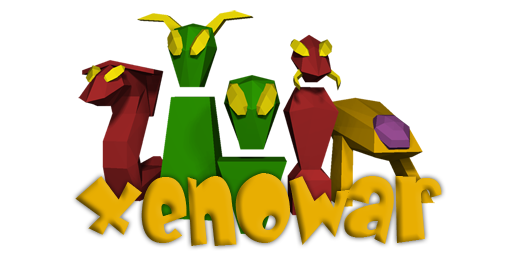
<style>
.page{position:relative;width:512px;height:256px;background:#ffffff}
.page>*{position:absolute;margin:0}
.t1{font:81.9px "BabyKruffy";letter-spacing:0.05em;color:#e8ae02}
</style>
<div class="page">
<p class="t1" style="left:75px;top:173px;width:367px;height:73px">Xenowar</p>
</div>
